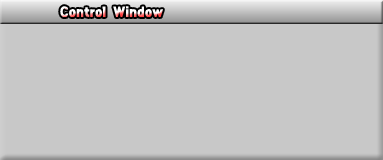
<style>
.page{position:relative;width:383px;height:160px;background:#c8c8c8}
.page>*{position:absolute;margin:0}
.t1{font:14px "GothicXB-HM"}
</style>
<div class="page">
<p class="t1" style="left:60px;top:6px;width:103px;height:11px">Control Window</p>
</div>
